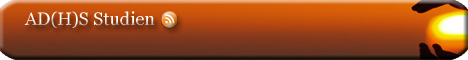
<style>
.page{position:relative;width:468px;height:60px}
.page>*{position:absolute;margin:0}
.t1{font:18px "Georgia";color:#ffffff}
</style>
<div class="page">
<p class="t1" style="left:24px;top:11px;width:131px;height:17px">AD(H)S Studien</p>
</div>
